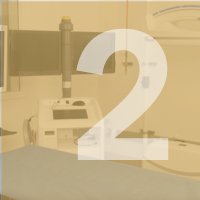
<style>
.page{position:relative;width:200px;height:200px}
.page>*{position:absolute;margin:0}
.t1{font:187.5px "PostGrotesk-Bold";color:#e8dcc5}
</style>
<div class="page">
<p class="t1" style="left:76px;top:28px;width:93px;height:132px">2</p>
</div>
